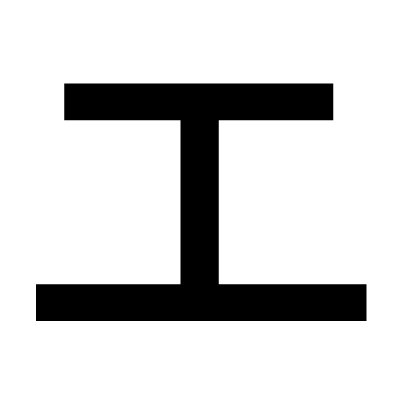
<style>
.page{position:relative;width:400px;height:400px;background:#ffffff}
.page>*{position:absolute;margin:0}
.t1{font:424.8px "MS-PGothic";color:#000000}
</style>
<div class="page">
<p class="t1" style="left:36px;top:83px;width:331px;height:238px">エ</p>
</div>
